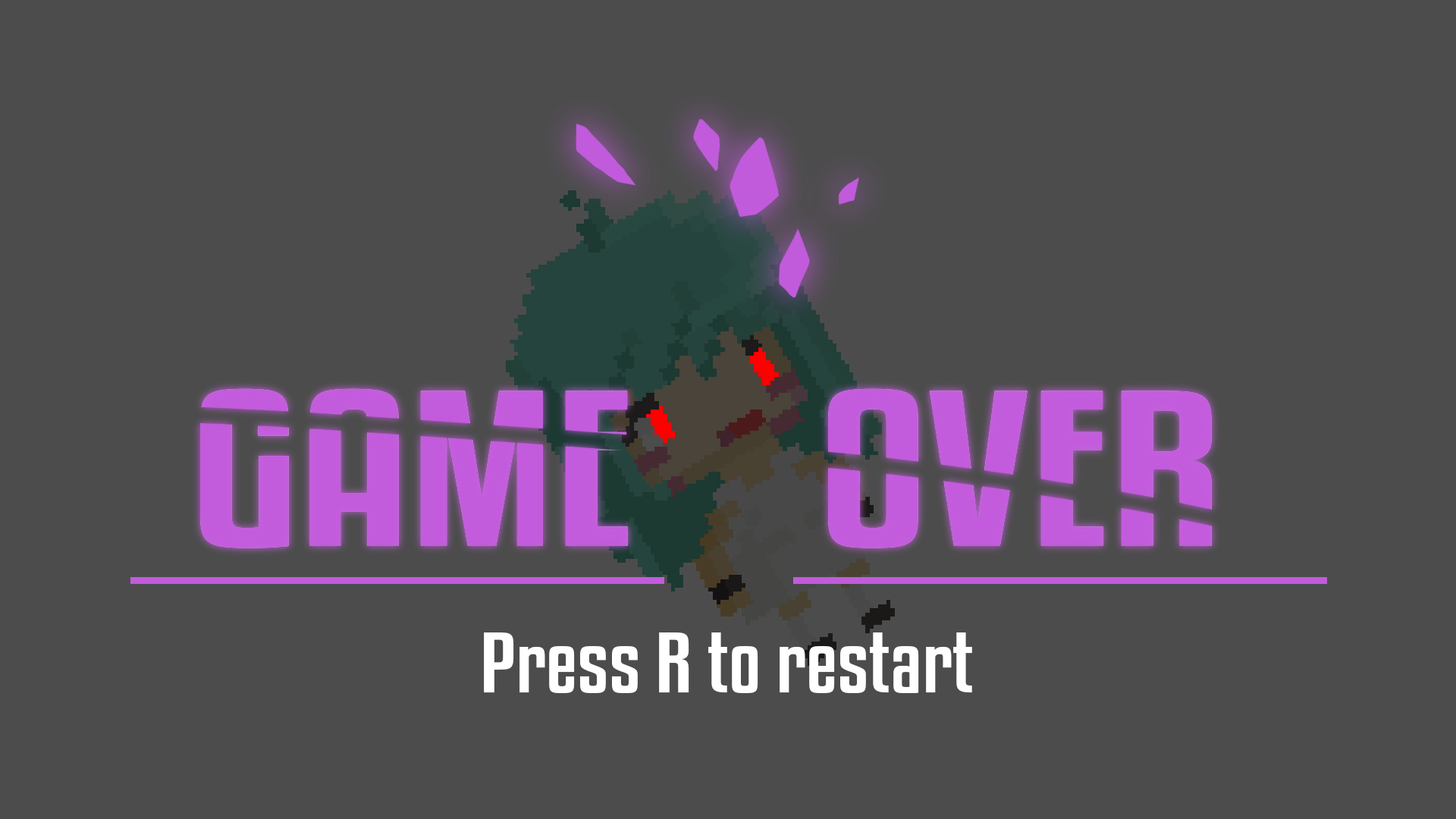
<style>
.page{position:relative;width:1456px;height:819px;background:#4c4c4c}
.page>*{position:absolute;margin:0}
.t1{font:75.8px "KenyanCoffeeRg-Regular";color:#ffffff;scale:1.18 1}
</style>
<div class="page">
<p class="t1" style="left:484px;top:632px;width:488px;height:61px">Press R to restart</p>
</div>
